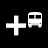
<style>
.page{position:relative;width:48px;height:48px;background:#000000}
.page>*{position:absolute;margin:0}
.t1{font:30px "Verdana-Bold";color:#ffffff}
</style>
<div class="page">
<p class="t1" style="left:6px;top:15px;width:20px;height:21px">+</p>
</div>
